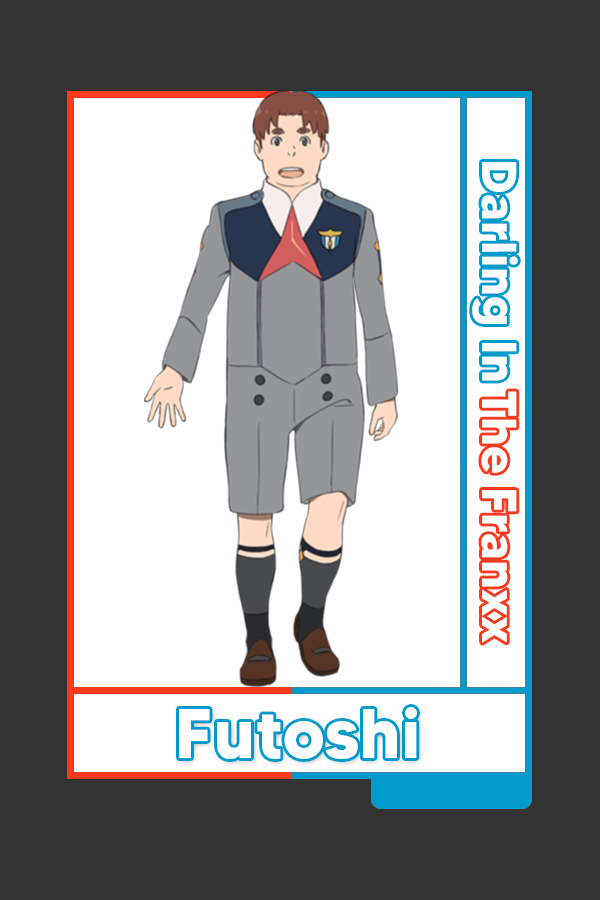
<style>
.page{position:relative;width:600px;height:900px;background:#ffffff}
.page>*{position:absolute;margin:0}
.t1{font:48.8px "MADETOMMY-Bold";color:#ffffff}
.t2{font:70.1px "MADETOMMY-Bold";color:#ffffff}
</style>
<div class="page">
<p class="t1" style="left:472px;top:162px;width:46px;height:219px;rotate:90deg">Darling In</p>
<p class="t1" style="left:481px;top:391px;width:36px;height:252px;rotate:90deg">The Franxx</p>
<p class="t2" style="left:179px;top:707px;width:238px;height:52px">Futoshi</p>
</div>
